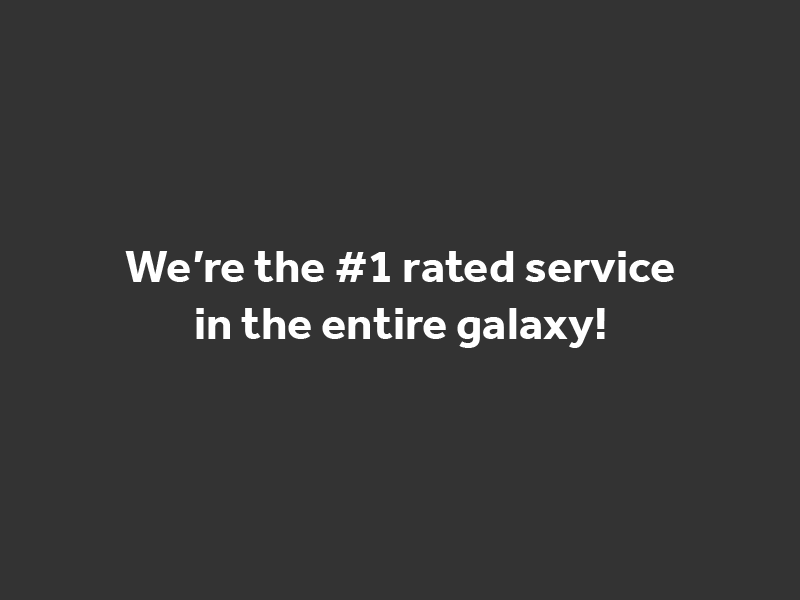
<style>
.page{position:relative;width:800px;height:600px;background:#333333}
.page>*{position:absolute;margin:0}
.t1{font:47.1px "Effra-Bold";color:#ffffff}
</style>
<div class="page">
<p class="t1" style="left:125px;top:251px;width:549px;height:97px;text-align:center">We’re the #1 rated service<br>in the entire galaxy!</p>
</div>
